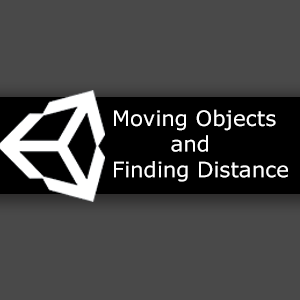
<style>
.page{position:relative;width:300px;height:300px;background:#494949}
.page>*{position:absolute;margin:0}
.t1{font:21.3px "Verdana";color:#ffffff}
</style>
<div class="page">
<p class="t1" style="left:114px;top:109px;width:174px;height:73px">Moving Objects<br>    and<br>Finding Distance</p>
</div>
